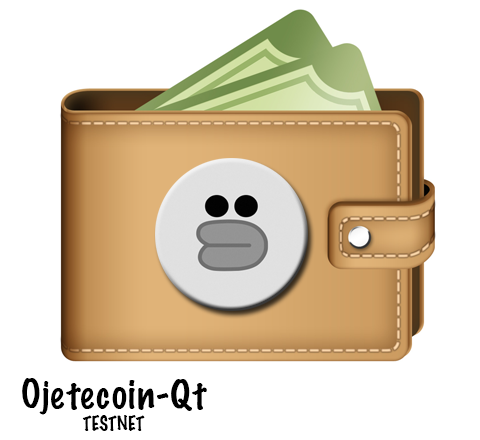
<style>
.page{position:relative;width:480px;height:440px;background:#ffffff}
.page>*{position:absolute;margin:0}
.t1{font:36px "MarkerFelt-Thin";color:#000000}
.t2{font:18px "MarkerFelt-Thin";color:#000000}
</style>
<div class="page">
<p class="t1" style="left:22px;top:378px;width:185px;height:53px;text-align:center">Ojetecoin-Qt<br><span class="t2">TESTNET</span></p>
</div>
